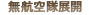
<style>
.page{position:relative;width:89px;height:15px;background:#ffffff}
.page>*{position:absolute;margin:0}
.t1{font:12px "GothicMB101Pr6N-Medium";font-weight:bold}
</style>
<div class="page">
<p class="t1" style="left:8px;top:0px;width:74px;height:13px">無航空隊展開</p>
</div>
